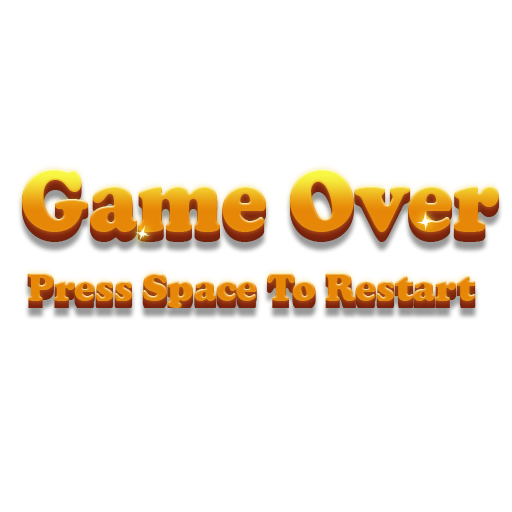
<style>
.page{position:relative;width:512px;height:512px;background:#ffffff}
.page>*{position:absolute;margin:0}
.t1{font:91.7px "CooperBlack";letter-spacing:-0.005em;scale:0.95 1}
.t2{font:41.7px "CooperBlack";letter-spacing:-0.005em;color:#e1901b;scale:0.95 1}
</style>
<div class="page">
<p class="t1" style="left:22px;top:169px;width:477px;height:63px">Game Over</p>
<p class="t2" style="left:27px;top:273px;width:449px;height:35px">Press Space To Restart</p>
</div>
